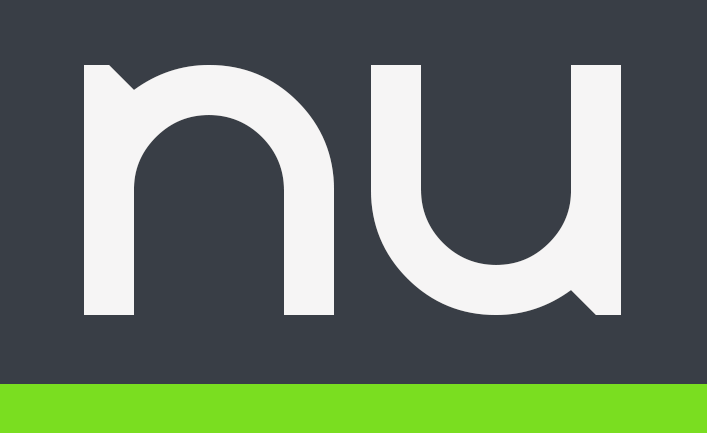
<style>
.page{position:relative;width:707px;height:433px;background:#393e46}
.page>*{position:absolute;margin:0}
.t1{font:500px "Stark";letter-spacing:-0.025em;color:#f6f5f5}
</style>
<div class="page">
<p class="t1" style="left:84px;top:65px;width:537px;height:250px">nu</p>
</div>
